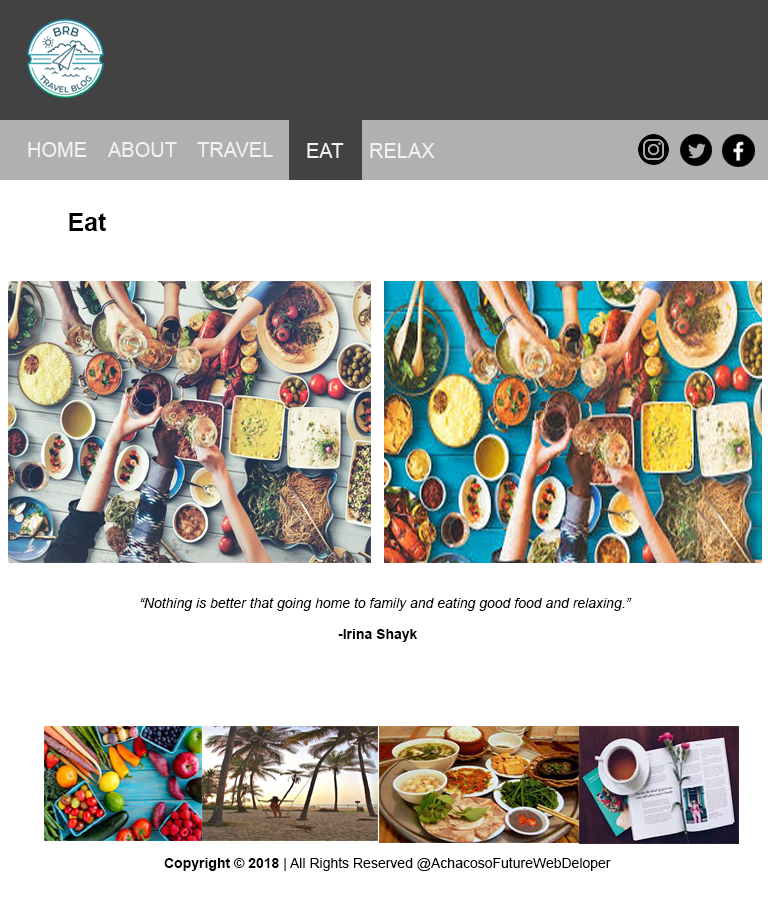
<style>
.page{position:relative;width:768px;height:900px;background:#ffffff}
.page>*{position:absolute;margin:0}
.t1{font:20px "ArialMT";color:#f2f2f3}
.t2{font:25px "Arial-BoldMT";color:#000000}
.t3{font:14px "Arial-ItalicMT";color:#000000}
.t4{font:14px "Arial-BoldMT";color:#000000}
.t5{font:14px "ArialMT";color:#000000}
</style>
<div class="page">
<p class="t1" style="left:28px;top:142px;width:59px;height:15px">HOME</p>
<p class="t1" style="left:108px;top:142px;width:69px;height:15px">ABOUT</p>
<p class="t1" style="left:197px;top:142px;width:76px;height:15px">TRAVEL</p>
<p class="t1" style="left:307px;top:143px;width:37px;height:15px">EAT</p>
<p class="t1" style="left:370px;top:143px;width:65px;height:15px">RELAX</p>
<p class="t2" style="left:69px;top:213px;width:37px;height:18px">Eat</p>
<p class="t3" style="left:140px;top:598px;width:492px;height:13px">“Nothing is better that going home to family and eating good food and relaxing.”</p>
<p class="t4" style="left:338px;top:629px;width:79px;height:13px">-Irina Shayk</p>
<p class="t5" style="left:164px;top:857px;width:447px;height:14px"><span class="t4">Copyright © 2018 </span>| All Rights Reserved @AchacosoFutureWebDeloper</p>
</div>
